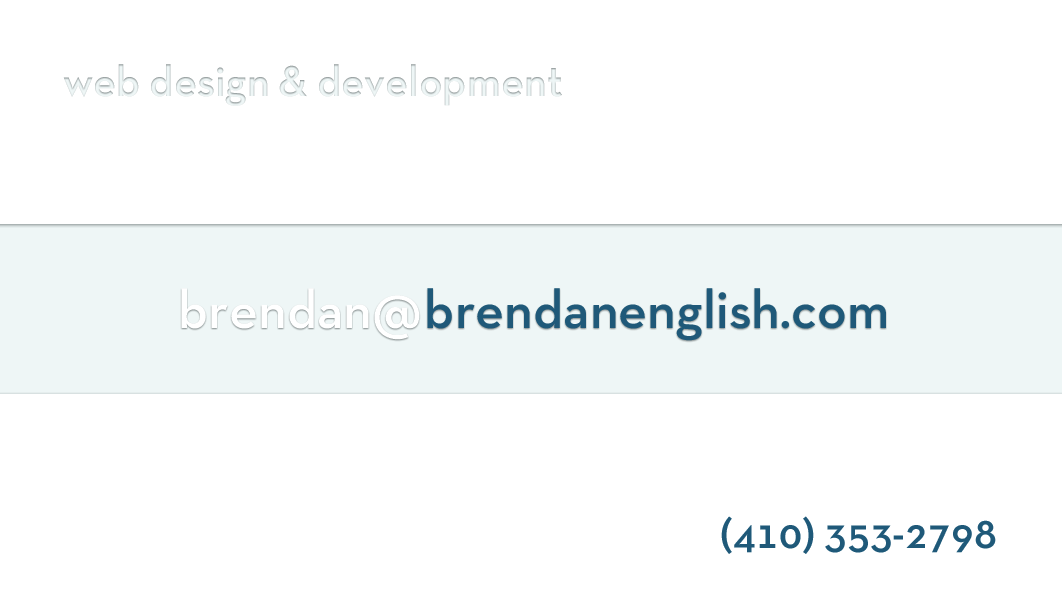
<style>
.page{position:relative;width:1062px;height:615px;background:#ffffff}
.page>*{position:absolute;margin:0}
.t1{font:44px "NeutraTextTF-Demi";color:#eef6f6}
.t2{font:55px "NeutraTextTF-Demi";color:#ffffff}
.t3{font:55px "NeutraTextTF-Demi";color:#1f5a79}
.t4{font:44px "NeutraTextTF-Demi";color:#1f5a79}
</style>
<div class="page">
<p class="t1" style="left:63px;top:64px;width:499px;height:42px">web design &amp; development</p>
<p class="t2" style="left:181px;top:288px;width:239px;height:52px">brendan@</p>
<p class="t3" style="left:427px;top:288px;width:459px;height:53px">brendanenglish.com</p>
<p class="t4" style="left:721px;top:516px;width:275px;height:38px">(410) 353-2798</p>
</div>
